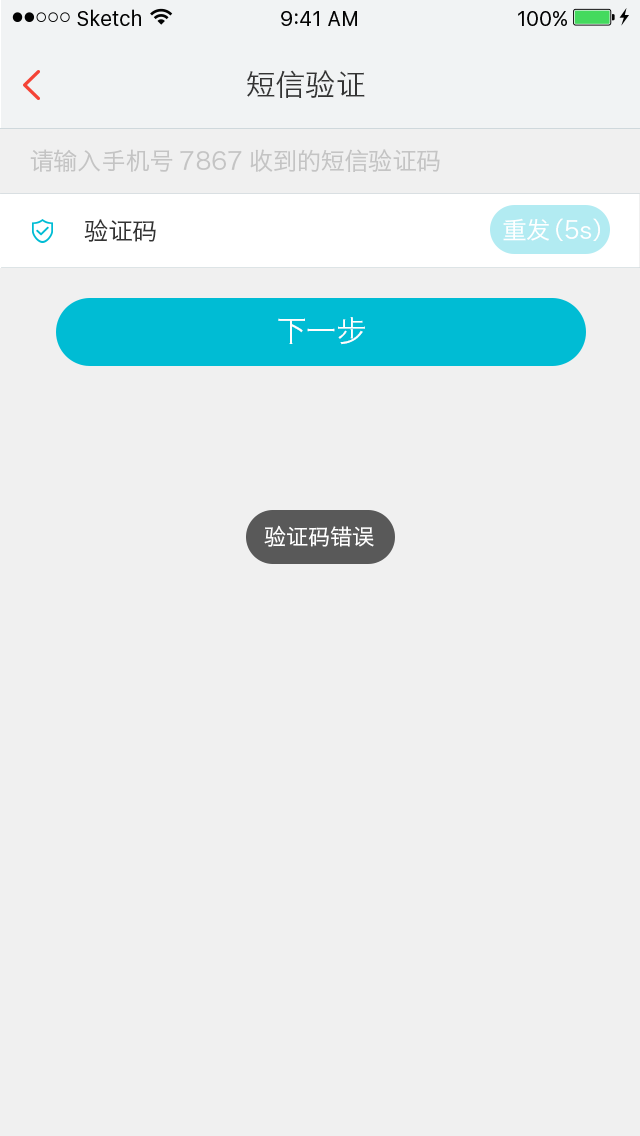
<style>
.page{position:relative;width:640px;height:1136px;background:#f0f0f0}
.page>*{position:absolute;margin:0}
.t1{font:30px "HiraginoSansGB-W3";color:#333333}
.t2{font:24.2px "HiraginoSansGB-W3";color:#c4c4c4}
.t3{font:24px "HiraginoSansGB-W3";color:#333333}
.t4{font:24px "HiraginoSansGB-W3";color:#ffffff}
.t5{font:30px "HiraginoSansGB-W3";color:#fffefe}
.t6{font:22px "HiraginoSansGB-W3";color:#ffffff}
</style>
<div class="page">
<p class="t1" style="left:247px;top:70px;width:118px;height:28px">短信验证</p>
<p class="t2" style="left:30px;top:149px;width:410px;height:23px">请输入手机号7867收到的短信验证码</p>
<p class="t3" style="left:84px;top:219px;width:72px;height:23px">验证码</p>
<p class="t4" style="left:503px;top:218px;width:46px;height:23px">重发</p>
<p class="t4" style="left:556px;top:218px;width:44px;height:23px">（5s）</p>
<p class="t5" style="left:278px;top:317px;width:87px;height:28px">下一步</p>
<p class="t6" style="left:264px;top:525px;width:110px;height:22px">验证码错误</p>
</div>
